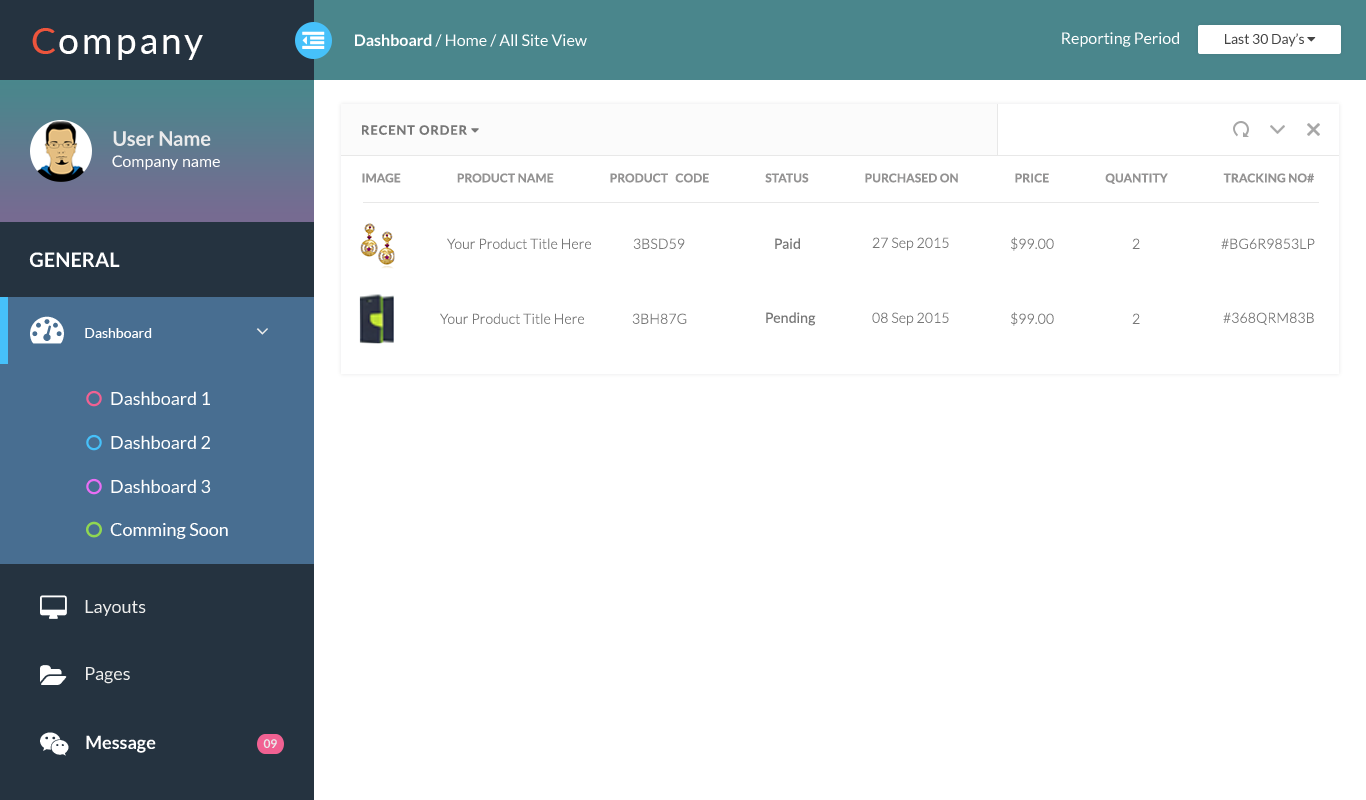
<style>
.page{position:relative;width:1366px;height:800px;background:#ffffff}
.page>*{position:absolute;margin:0}
.t1{font:37px "Lato-Regular";letter-spacing:0.08em;color:#ffffff}
.t2{font:37px "Lato-Regular";letter-spacing:0.08em;color:#ed553c}
.t3{font:16px "Lato-Regular";color:#ffffff}
.t4{font:16px "Lato-Bold";color:#ffffff}
.t5{font:20px "Lato-Bold";color:#eaebec}
.t6{font:12px "Lato-Bold";letter-spacing:0.01em;color:#949393;text-transform:uppercase}
.t7{font:14px "Lato-Light";letter-spacing:0.01em;color:#777777}
.t8{font:14px "Lato-Regular";letter-spacing:0.01em;color:#777777}
.t9{font:20px "Lato-Bold";color:#ffffff;text-transform:uppercase}
.t10{font:14px "Lato-Regular";color:#ffffff}
.t11{font:18px "Lato-Regular";color:#ededec}
.t12{font:18px "Lato-Bold";color:#ffffff}
.t13{font:12px "Lato-Bold";color:#eaebec}
</style>
<div class="page">
<p class="t1" style="left:32px;top:28px;width:171px;height:32px"><span class="t2">C</span>ompany</p>
<p class="t3" style="left:355px;top:34px;width:232px;height:13px"><span class="t4">Dashboard </span>/ Home / All Site View</p>
<p class="t3" style="left:1062px;top:32px;width:117px;height:15px">Reporting Period</p>
<p class="t5" style="left:113px;top:131px;width:98px;height:15px">User Name</p>
<p class="t3" style="left:112px;top:155px;width:108px;height:15px">Company name</p>
<p class="t6" style="left:362px;top:173px;width:952px;height:11px">Image                       Product Name                       Product   Code                       Status                       Purchased On                       Price                       Quantity                       Tracking No#</p>
<p class="t7" style="left:447px;top:238px;width:144px;height:11px">Your Product Title Here</p>
<p class="t7" style="left:633px;top:238px;width:52px;height:11px">3BSD59</p>
<p class="t8" style="left:775px;top:238px;width:25px;height:11px">Paid</p>
<p class="t7" style="left:872px;top:237px;width:77px;height:14px">27 Sep 2015</p>
<p class="t7" style="left:1011px;top:237px;width:43px;height:14px">$99.00</p>
<p class="t7" style="left:1132px;top:238px;width:8px;height:11px">2</p>
<p class="t7" style="left:1221px;top:238px;width:94px;height:11px">#BG6R9853LP</p>
<p class="t9" style="left:29px;top:252px;width:91px;height:15px">General</p>
<p class="t7" style="left:440px;top:313px;width:144px;height:11px">Your Product Title Here</p>
<p class="t7" style="left:632px;top:313px;width:55px;height:11px">3BH87G</p>
<p class="t8" style="left:766px;top:312px;width:50px;height:14px">Pending</p>
<p class="t7" style="left:872px;top:312px;width:77px;height:14px">08 Sep 2015</p>
<p class="t7" style="left:1011px;top:312px;width:43px;height:14px">$99.00</p>
<p class="t7" style="left:1132px;top:313px;width:8px;height:11px">2</p>
<p class="t7" style="left:1223px;top:312px;width:91px;height:13px">#368QRM83B</p>
<p class="t10" style="left:85px;top:328px;width:67px;height:10px">Dashboard</p>
<p class="t11" style="left:85px;top:600px;width:61px;height:16px">Layouts</p>
<p class="t11" style="left:86px;top:667px;width:44px;height:17px">Pages</p>
<p class="t12" style="left:86px;top:735px;width:70px;height:18px">Message</p>
<p class="t13" style="left:263px;top:739px;width:14px;height:9px">09</p>
</div>
